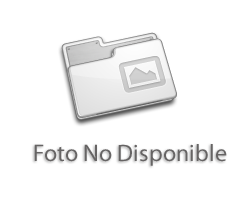
<style>
.page{position:relative;width:250px;height:200px;background:#ffffff}
.page>*{position:absolute;margin:0}
.t1{font:24px "MyriadPro-Regular";color:#666464}
</style>
<div class="page">
<p class="t1" style="left:34px;top:144px;width:193px;height:22px">Foto No Disponible</p>
</div>
